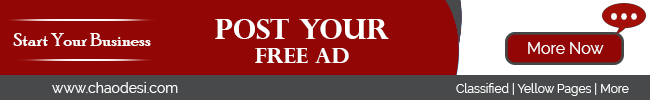
<style>
.page{position:relative;width:650px;height:100px;background:#920606}
.page>*{position:absolute;margin:0}
.t1{font:28px "PerpetuaTitlingMT-Bold";color:#ffffff}
.t2{font:19px "PoorRichard-Regular";color:#ffffff}
.t3{font:21px "PerpetuaTitlingMT-Bold";color:#fafcfd}
.t4{font:16px "Raleway-Regular";color:#fcfdfd}
.t5{font:14px "Raleway-Regular";color:#ffffff}
.t6{font:12px "Raleway-Regular";color:#ffffff}
</style>
<div class="page">
<p class="t1" style="left:215px;top:18px;width:174px;height:21px">Post Your</p>
<p class="t2" style="left:13px;top:33px;width:138px;height:13px">Start Your Business</p>
<p class="t3" style="left:255px;top:48px;width:94px;height:15px">FREE AD</p>
<p class="t4" style="left:528px;top:42px;width:76px;height:12px">More Now</p>
<p class="t5" style="left:52px;top:82px;width:126px;height:11px">www.chaodesi.com</p>
<p class="t6" style="left:456px;top:83px;width:173px;height:13px">Classified | Yellow Pages | More</p>
</div>
